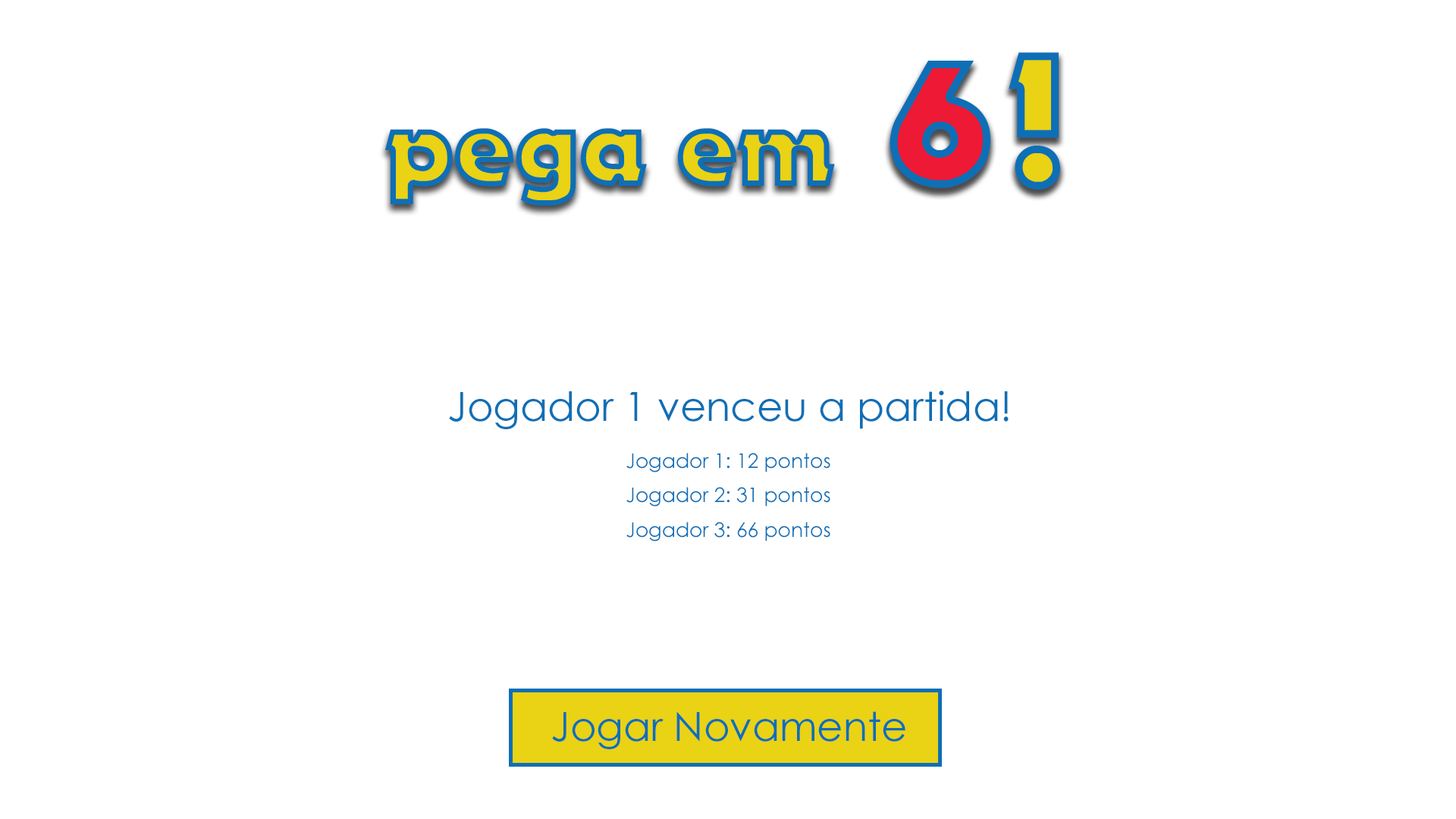
<style>
.page{position:relative;width:1456px;height:819px;background:#ffffff}
.page>*{position:absolute;margin:0}
.t1{font:187.3px "November"}
.t2{font:173.9px "November";color:#ee1934}
.t3{font:107px "November"}
.t4{font:40.1px "CenturyGothic";color:#0e6fb6}
.t5{font:20.1px/33.4px "CenturyGothic";color:#0e6fb6}
</style>
<div class="page">
<p class="t1" style="left:1009px;top:52px;width:51px;height:138px">!</p>
<p class="t2" style="left:890px;top:61px;width:100px;height:127px">6</p>
<p class="t3" style="left:385px;top:128px;width:450px;height:78px">pega em</p>
<p class="t4" style="left:449px;top:391px;width:560px;height:38px">Jogador 1 venceu a partida!</p>
<p class="t5" style="left:626px;top:453px;width:204px;height:88px">Jogador 1: 12 pontos<br>Jogador 2: 31 pontos<br>Jogador 3: 66 pontos</p>
<p class="t4" style="left:552px;top:711px;width:353px;height:38px">Jogar Novamente</p>
</div>
